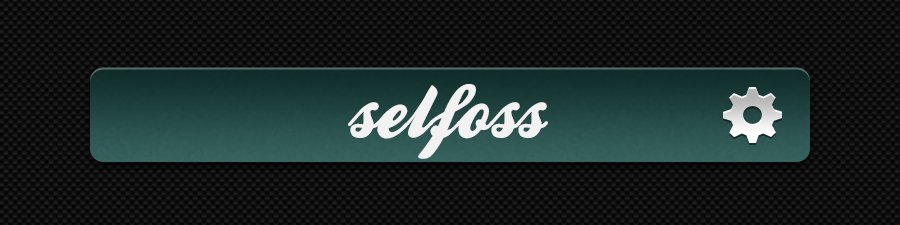
<style>
.page{position:relative;width:900px;height:225px}
.page>*{position:absolute;margin:0}
.t1{font:80.9px "BallparkWeiner";color:#f2f2f2}
</style>
<div class="page">
<p class="t1" style="left:348px;top:84px;width:200px;height:75px">selfoss</p>
</div>
